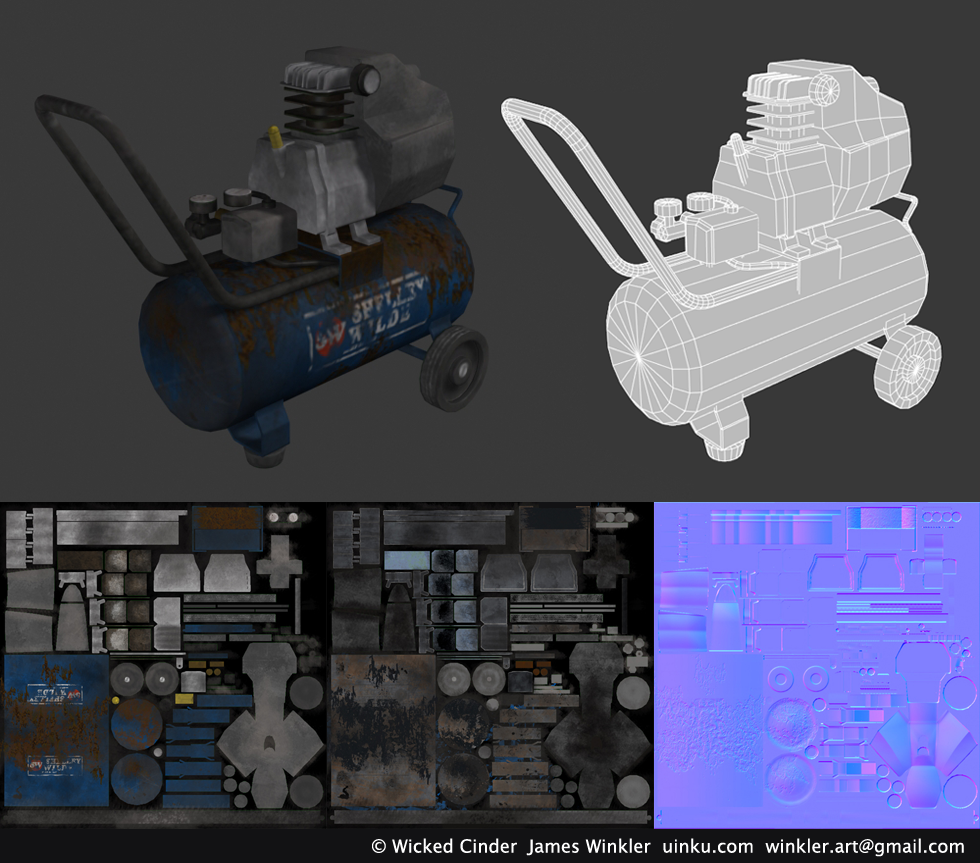
<style>
.page{position:relative;width:980px;height:863px;background:#383838}
.page>*{position:absolute;margin:0}
.t1{font:18px "LucidaSansUnicode";color:#ffffff}
</style>
<div class="page">
<p class="t1" style="left:372px;top:838px;width:592px;height:19px">© Wicked Cinder  James Winkler  uinku.com  winkler.art@gmail.com</p>
</div>
